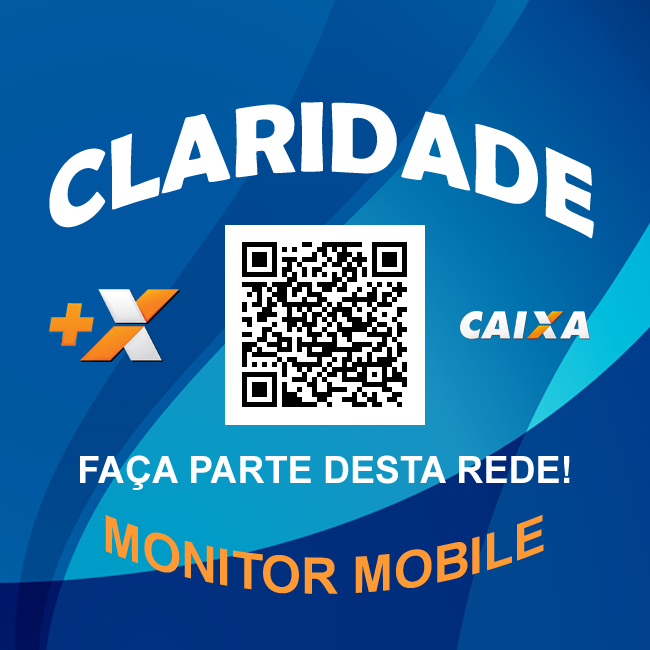
<style>
.page{position:relative;width:650px;height:650px}
.page>*{position:absolute;margin:0}
.t1{font:100px "BerlinSansFBDemi-Bold";color:#ffffff}
.t2{font:37.5px "Arial-BoldMT";color:#ffffff}
.t3{font:50px "Arial-BoldMT";color:#ff9933}
</style>
<div class="page">
<p class="t1" style="left:49px;top:102px;width:545px;height:137px">CLARIDADE</p>
<p class="t2" style="left:80px;top:455px;width:490px;height:35px">FAÇA PARTE DESTA REDE!</p>
<p class="t3" style="left:105px;top:514px;width:439px;height:80px">MONITOR MOBILE</p>
</div>
